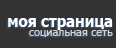
<style>
.page{position:relative;width:116px;height:48px;background:#333333}
.page>*{position:absolute;margin:0}
.t1{font:17px "Tahoma-Bold";color:#ffffff;scale:0.88 1}
.t2{font:11px "Tahoma";color:#d5d5d5}
</style>
<div class="page">
<p class="t1" style="left:8px;top:18px;width:105px;height:12px">моя страница</p>
<p class="t2" style="left:29px;top:30px;width:84px;height:7px">социальная сеть</p>
</div>
